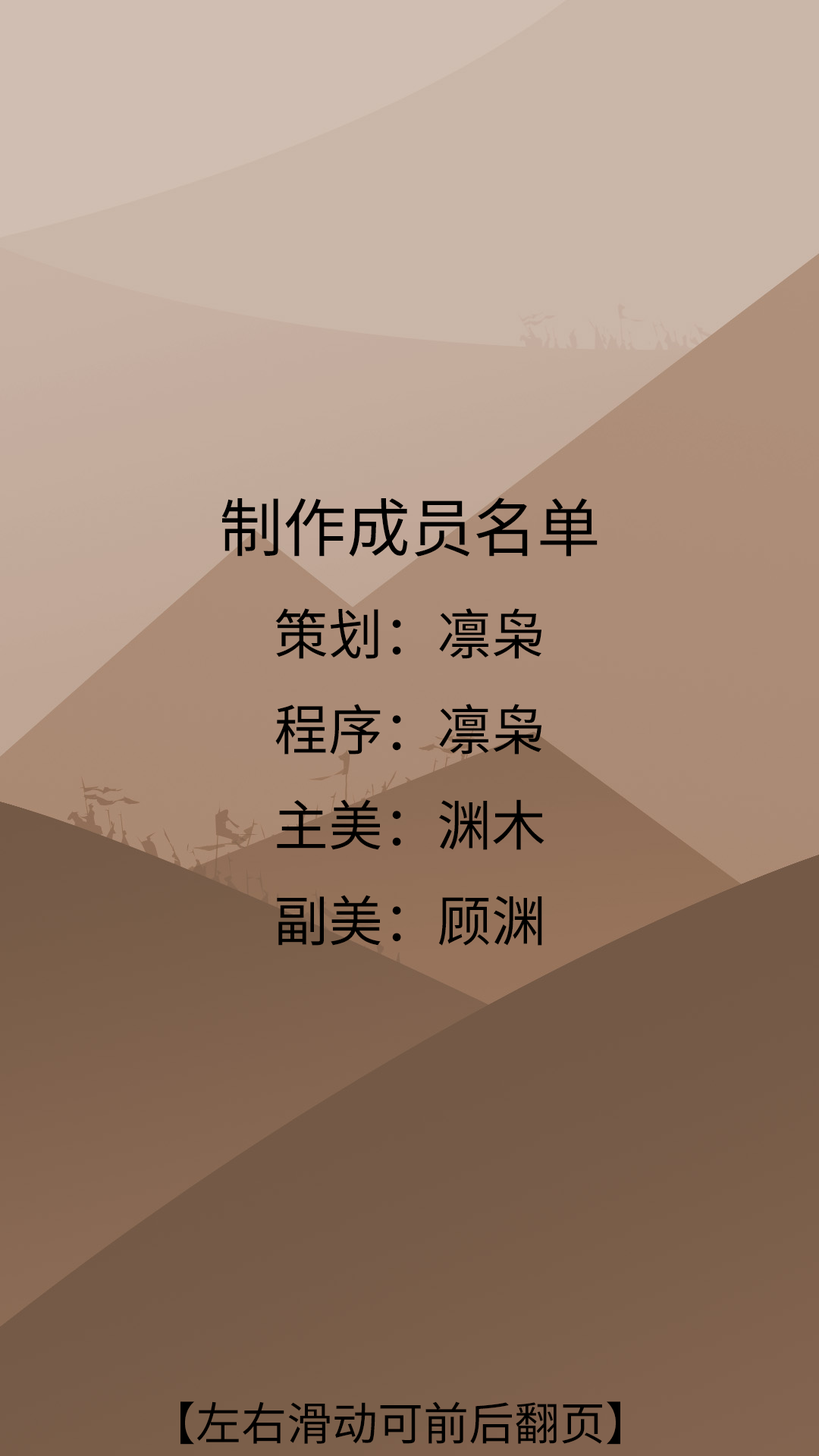
<style>
.page{position:relative;width:819px;height:1456px}
.page>*{position:absolute;margin:0}
.t1{font:54.6px "NotoSansHans-Regular";color:#000000}
.t2{font:63.7px "NotoSansHans-Regular";color:#000000}
.t3{font:45.5px "NotoSansHans-Regular";color:#000000}
</style>
<div class="page">
<p class="t1" style="left:221px;top:497px;width:377px;height:449px;text-align:center"><span class="t2">制作成员名单<br></span>策划：凛枭<br>程序：凛枭<br>主美：渊木<br>副美：顾渊</p>
<p class="t3" style="left:180px;top:1401px;width:440px;height:44px">【左右滑动可前后翻页】</p>
</div>
